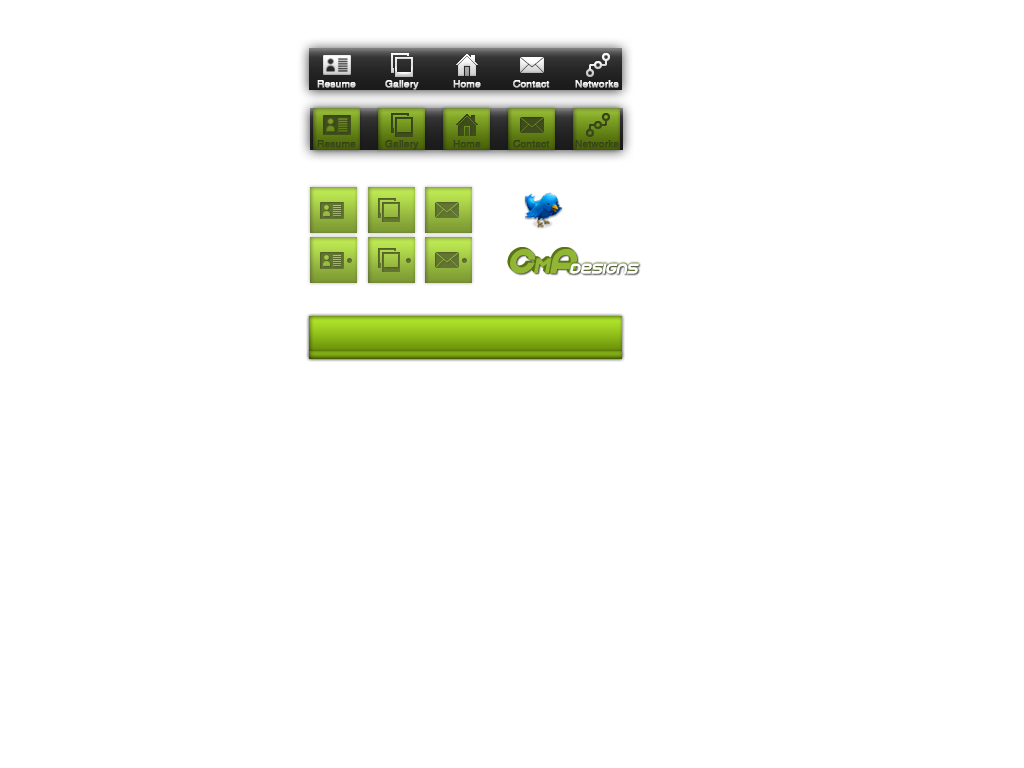
<style>
.page{position:relative;width:1024px;height:768px;background:#ffffff}
.page>*{position:absolute;margin:0}
.t1{font:10px "Helvetica";font-weight:bold}
.t2{font:10px "Helvetica";color:#394519;font-weight:bold}
.t3{font:10px "Helvetica";color:#394619;font-weight:bold}
.t4{font:10px "Helvetica";color:#384419;font-weight:bold}
.t5{font:10px "Helvetica";color:#3a461a;font-weight:bold}
</style>
<div class="page">
<p class="t1" style="left:317px;top:80px;width:39px;height:8px">Resume</p>
<p class="t1" style="left:385px;top:80px;width:34px;height:10px">Gallery</p>
<p class="t1" style="left:453px;top:80px;width:28px;height:8px">Home</p>
<p class="t1" style="left:513px;top:80px;width:37px;height:8px">Contact</p>
<p class="t1" style="left:575px;top:80px;width:44px;height:8px">Networks</p>
<p class="t2" style="left:317px;top:140px;width:39px;height:8px">Resume</p>
<p class="t3" style="left:385px;top:140px;width:34px;height:10px">Gallery</p>
<p class="t4" style="left:453px;top:140px;width:28px;height:8px">Home</p>
<p class="t2" style="left:513px;top:140px;width:37px;height:8px">Contact</p>
<p class="t5" style="left:575px;top:140px;width:44px;height:8px">Networks</p>
</div>
